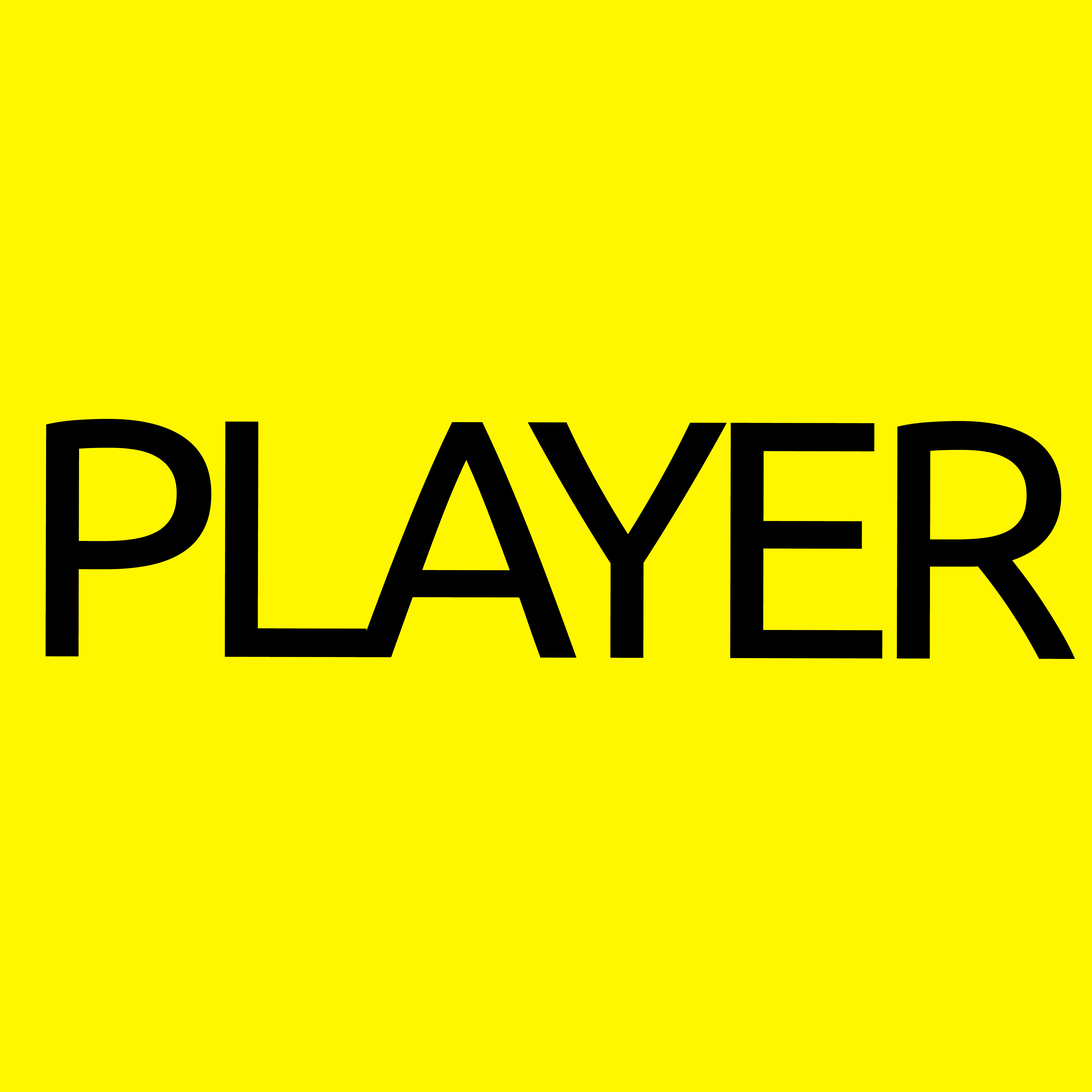
<style>
.page{position:relative;width:1092px;height:1092px;background:#fff700}
.page>*{position:absolute;margin:0}
.t1{font:339.4px "Ubuntu-Regular";letter-spacing:-0.08em;color:#000000}
</style>
<div class="page">
<p class="t1" style="left:45px;top:419px;width:1030px;height:240px">PLAYER</p>
</div>
